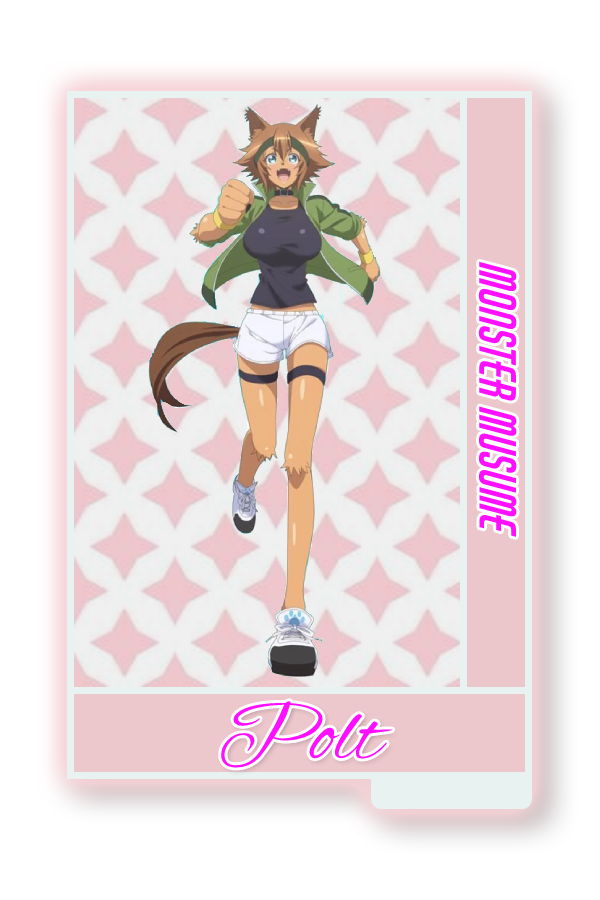
<style>
.page{position:relative;width:600px;height:900px;background:#ffffff}
.page>*{position:absolute;margin:0}
.t1{font:48.8px "AirAmerica-Regular";color:#ff0fff}
.t2{font:88px "AlexBrush-Regular";color:#ff0fff}
</style>
<div class="page">
<p class="t1" style="left:478px;top:261px;width:39px;height:276px;rotate:90deg">Monster Musume</p>
<p class="t2" style="left:221px;top:701px;width:172px;height:67px">Polt</p>
</div>
